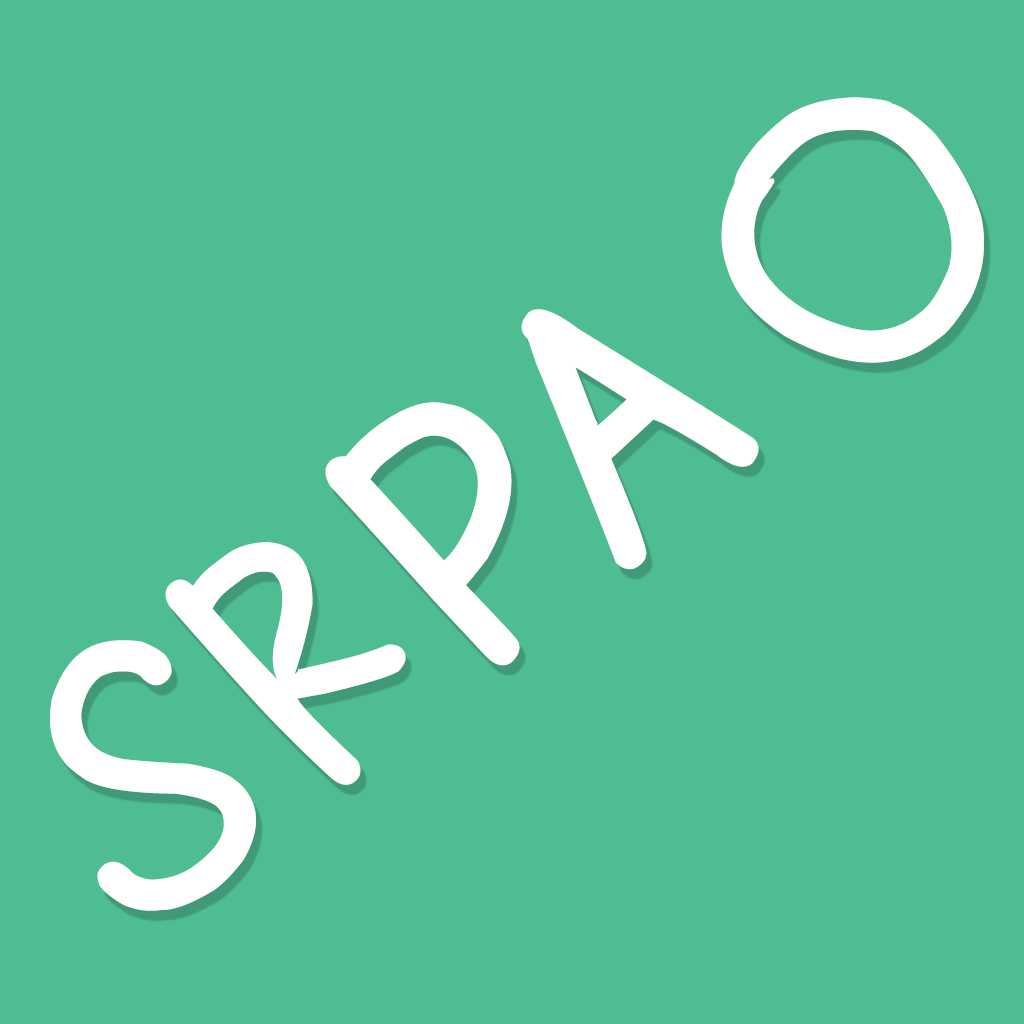
<style>
.page{position:relative;width:1024px;height:1024px;background:#4fbd92}
.page>*{position:absolute;margin:0}
.t1{font:317.3px "CeesHand";color:#ffffff;text-transform:uppercase;font-weight:bold}
</style>
<div class="page">
<p class="t1" style="left:50px;top:97px;width:934px;height:814px;rotate:-37deg">Srpao</p>
</div>
